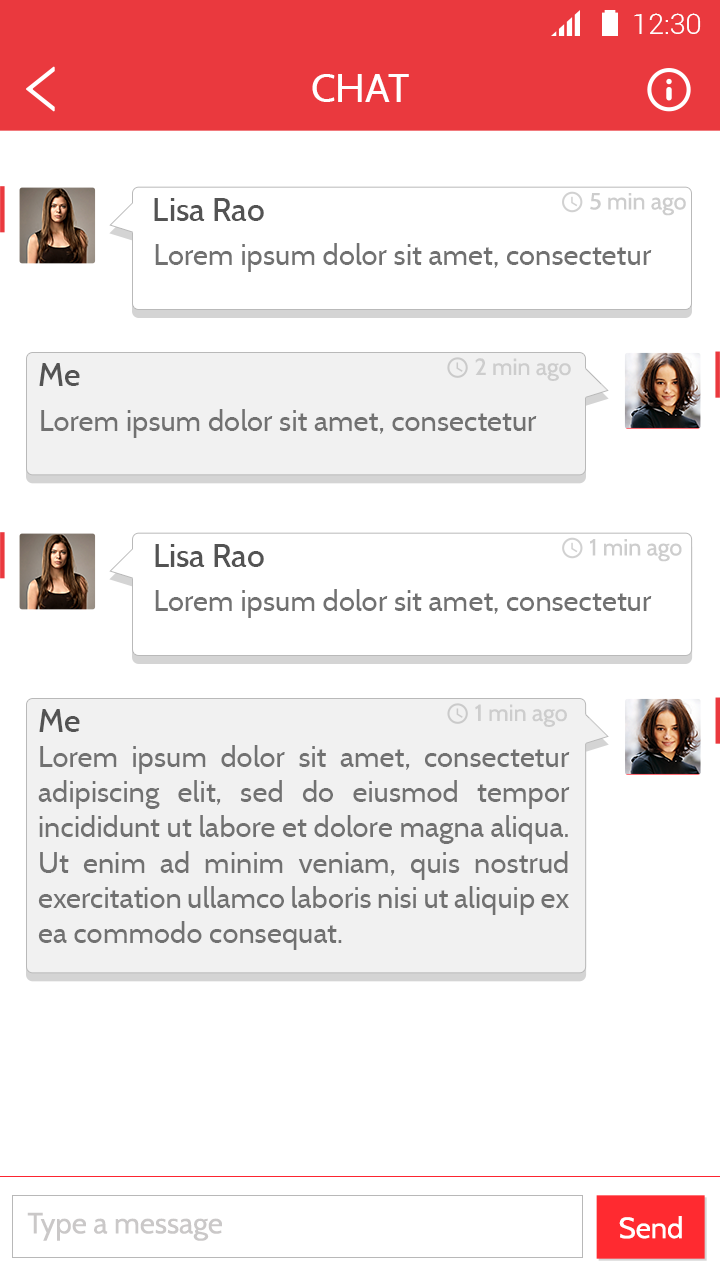
<style>
.page{position:relative;width:720px;height:1280px;background:#ffffff}
.page>*{position:absolute;margin:0}
.t1{font:28.4px "Roboto-Light";color:#ffffff}
.t2{font:40px "Cabin-Regular";color:#ffffff}
.t3{font:32.1px "Cabin-Medium";color:#535353}
.t4{font:23.3px "Cabin-Regular";color:#cdcdcd}
.t5{font:29.3px "Cabin-Regular";color:#717171}
.t6{font:32px "Cabin-Medium";color:#535353}
.t7{font:29.3px "Cabin-Regular";color:#cac8c8}
.t8{font:29.1px "Cabin-Regular";color:#ffffff}
</style>
<div class="page">
<p class="t1" style="left:634px;top:13px;width:67px;height:21px">12:30</p>
<p class="t2" style="left:312px;top:74px;width:97px;height:28px">CHAT</p>
<p class="t3" style="left:154px;top:198px;width:110px;height:23px">Lisa Rao</p>
<p class="t4" style="left:590px;top:193px;width:96px;height:23px">5 min ago</p>
<p class="t5" style="left:155px;top:243px;width:497px;height:29px">Lorem ipsum dolor sit amet, consectetur</p>
<p class="t6" style="left:39px;top:363px;width:41px;height:23px">Me</p>
<p class="t4" style="left:475px;top:358px;width:96px;height:23px">2 min ago</p>
<p class="t5" style="left:41px;top:409px;width:496px;height:29px">Lorem ipsum dolor sit amet, consectetur</p>
<p class="t3" style="left:155px;top:544px;width:109px;height:23px">Lisa Rao</p>
<p class="t4" style="left:590px;top:539px;width:92px;height:23px">1 min ago</p>
<p class="t5" style="left:155px;top:589px;width:497px;height:29px">Lorem ipsum dolor sit amet, consectetur</p>
<p class="t6" style="left:39px;top:709px;width:41px;height:23px">Me</p>
<p class="t4" style="left:475px;top:704px;width:92px;height:23px">1 min ago</p>
<p class="t5" style="left:38px;top:745px;width:532px;height:205px;text-align:justify">Lorem ipsum dolor sit amet, consectetur adipiscing elit, sed do eiusmod tempor incididunt ut labore et dolore magna aliqua. Ut enim ad minim veniam, quis nostrud exercitation ullamco laboris nisi ut aliquip ex ea commodo consequat.</p>
<p class="t7" style="left:27px;top:1212px;width:195px;height:29px">Type a message</p>
<p class="t8" style="left:619px;top:1216px;width:63px;height:23px">Send</p>
</div>
